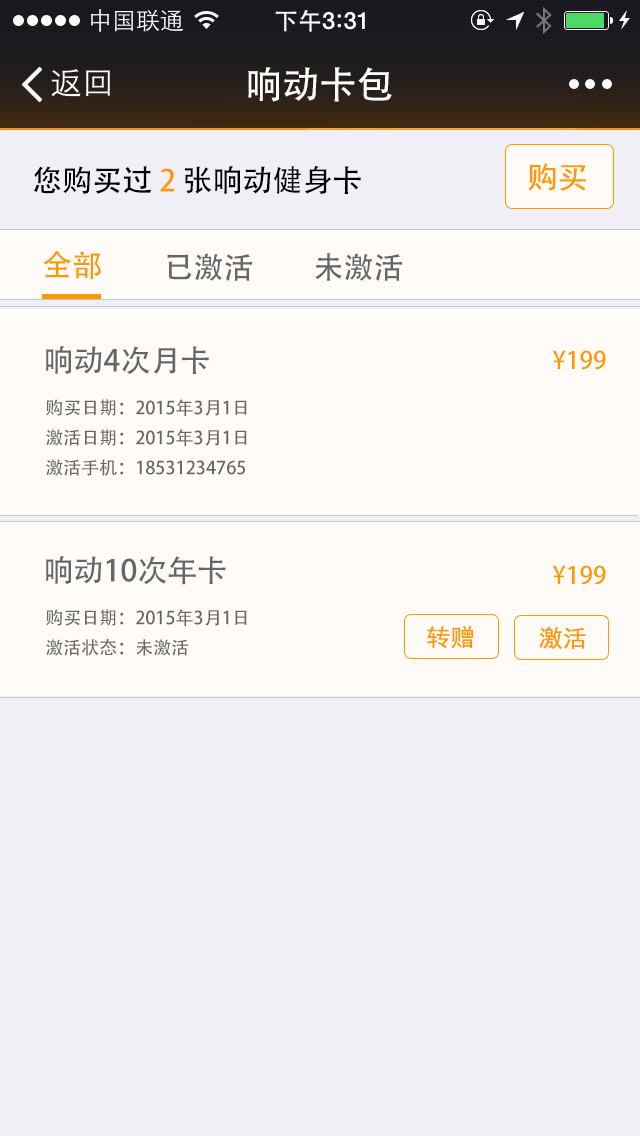
<style>
.page{position:relative;width:640px;height:1136px;background:#f0eff5}
.page>*{position:absolute;margin:0}
.t1{font:37.2px "AdobeHeitiStd-Regular";color:#fffbf8}
.t2{font:30px "AdobeHeitiStd-Regular";color:#000000}
.t3{font:30px "AdobeHeitiStd-Regular";color:#ff9900}
.t4{font:30px "SimHei";color:#ff9900}
.t5{font:30px "AdobeHeitiStd-Regular";color:#666666}
.t6{font:24px "AdobeHeitiStd-Regular";color:#ff9900}
.t7{font:18px/30px "AdobeHeitiStd-Regular";color:#666666}
.t8{font:24px "SimHei";color:#ff9900}
</style>
<div class="page">
<p class="t1" style="left:248px;top:67px;width:144px;height:35px">响动卡包</p>
<p class="t2" style="left:34px;top:166px;width:327px;height:28px">您购买过 <span class="t3">2</span> 张响动健身卡</p>
<p class="t4" style="left:528px;top:163px;width:58px;height:28px">购买</p>
<p class="t3" style="left:43px;top:250px;width:58px;height:29px">全部</p>
<p class="t5" style="left:167px;top:253px;width:85px;height:28px">已激活</p>
<p class="t5" style="left:315px;top:253px;width:87px;height:28px">未激活</p>
<p class="t5" style="left:46px;top:346px;width:163px;height:28px">响动4次月卡</p>
<p class="t6" style="left:552px;top:350px;width:54px;height:20px">¥199</p>
<p class="t7" style="left:46px;top:399px;width:201px;height:77px">购买日期：2015年3月1日<br>激活日期：2015年3月1日<br>激活手机：18531234765</p>
<p class="t5" style="left:46px;top:556px;width:180px;height:29px">响动10次年卡</p>
<p class="t6" style="left:552px;top:565px;width:54px;height:20px">¥199</p>
<p class="t7" style="left:46px;top:609px;width:201px;height:47px">购买日期：2015年3月1日<br>激活状态：未激活</p>
<p class="t8" style="left:427px;top:625px;width:47px;height:24px">转赠</p>
<p class="t8" style="left:539px;top:626px;width:47px;height:24px">激活</p>
</div>
